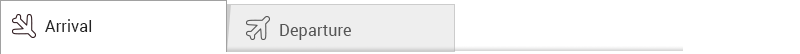
<style>
.page{position:relative;width:800px;height:54px;background:#ffffff}
.page>*{position:absolute;margin:0}
.t1{font:16px "Roboto-Regular";color:#222222}
.t2{font:16px "Roboto-Regular";color:#555555}
</style>
<div class="page">
<p class="t1" style="left:45px;top:19px;width:47px;height:13px">Arrival</p>
<p class="t2" style="left:280px;top:24px;width:71px;height:16px">Departure</p>
</div>
